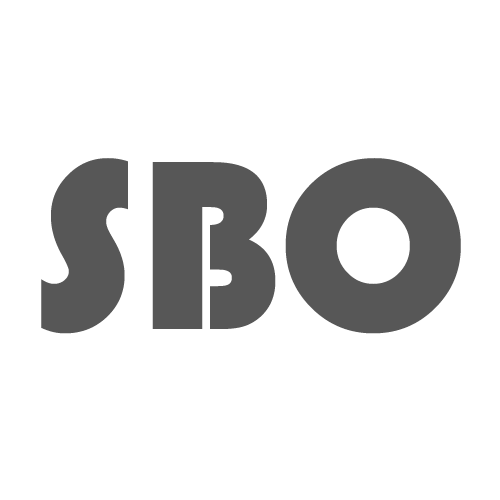
<style>
.page{position:relative;width:500px;height:500px;background:#ffffff}
.page>*{position:absolute;margin:0}
.t1{font:250px "Bauhaus93";color:#575757}
</style>
<div class="page">
<p class="t1" style="left:41px;top:158px;width:420px;height:176px">SBO</p>
</div>
